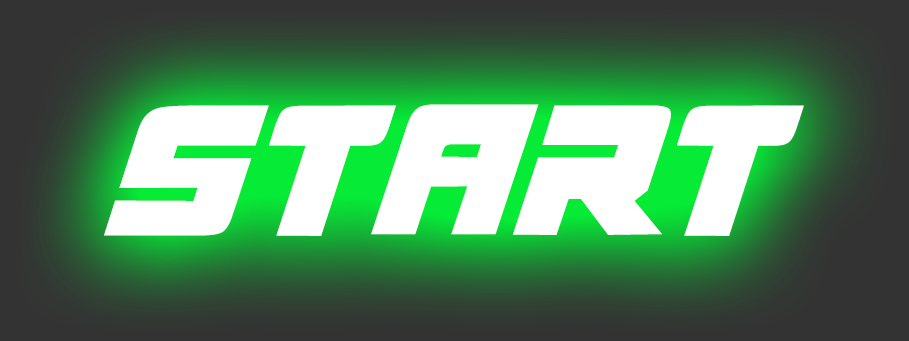
<style>
.page{position:relative;width:909px;height:341px}
.page>*{position:absolute;margin:0}
.t1{font:195.3px "STAR7";letter-spacing:-0.001em;color:#ffffff}
</style>
<div class="page">
<p class="t1" style="left:104px;top:104px;width:700px;height:132px">Start</p>
</div>
